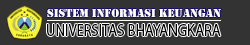
<style>
.page{position:relative;width:250px;height:45px;background:#333333}
.page>*{position:absolute;margin:0}
.t1{font:12px "Stencil";color:#ffffff}
.t2{font:16.6px "MyriadPro-Regular";color:#000000;scale:0.88 1}
</style>
<div class="page">
<p class="t1" style="left:47px;top:8px;width:174px;height:10px">Sistem Informasi KEUANGAN</p>
<p class="t2" style="left:47px;top:24px;width:174px;height:12px">UNIVERSITAS BHAYANGKARA</p>
</div>
